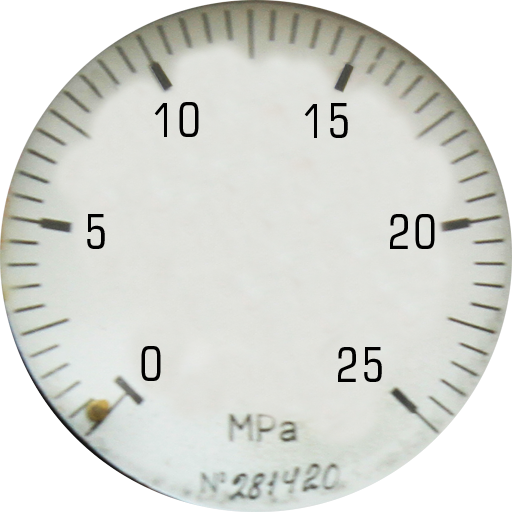
<style>
.page{position:relative;width:512px;height:512px;background:#ffffff}
.page>*{position:absolute;margin:0}
.t1{font:46px "EuropeCond";letter-spacing:0.05em;color:#000000}
</style>
<div class="page">
<p class="t1" style="left:154px;top:102px;width:45px;height:35px">10</p>
<p class="t1" style="left:304px;top:103px;width:44px;height:35px">15</p>
<p class="t1" style="left:87px;top:214px;width:18px;height:35px">5</p>
<p class="t1" style="left:390px;top:214px;width:45px;height:35px">20</p>
<p class="t1" style="left:141px;top:346px;width:20px;height:35px">0</p>
<p class="t1" style="left:338px;top:347px;width:44px;height:35px">25</p>
</div>
